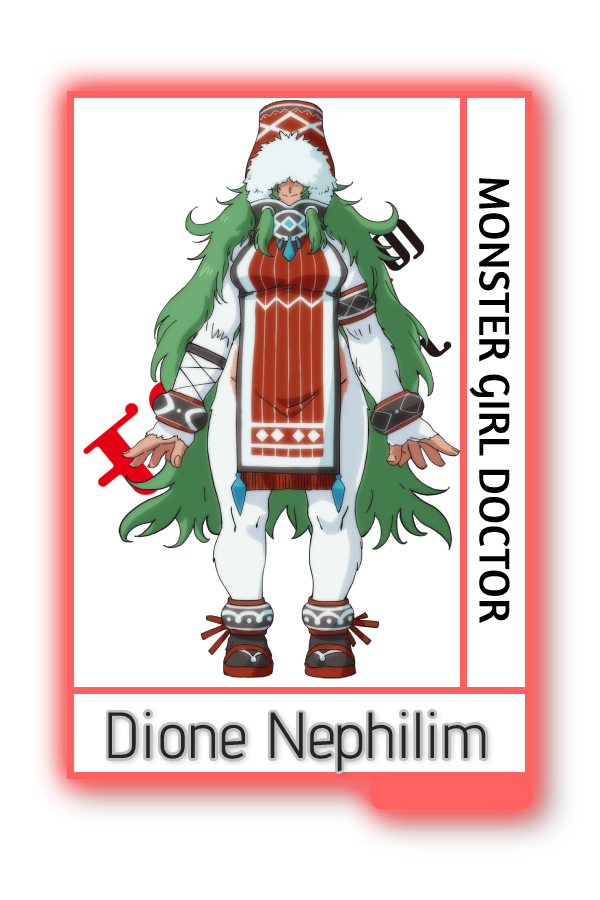
<style>
.page{position:relative;width:600px;height:900px;background:#ffffff}
.page>*{position:absolute;margin:0}
.t1{font:44px "Amaranth-Regular";color:#000000}
.t2{font:65px "AdventPro-Regular";color:#252525}
</style>
<div class="page">
<p class="t1" style="left:469px;top:178px;width:41px;height:446px;rotate:90deg">MONSTER GIRL DOCTOR</p>
<p class="t2" style="left:108px;top:711px;width:378px;height:61px">Dione Nephilim</p>
</div>
